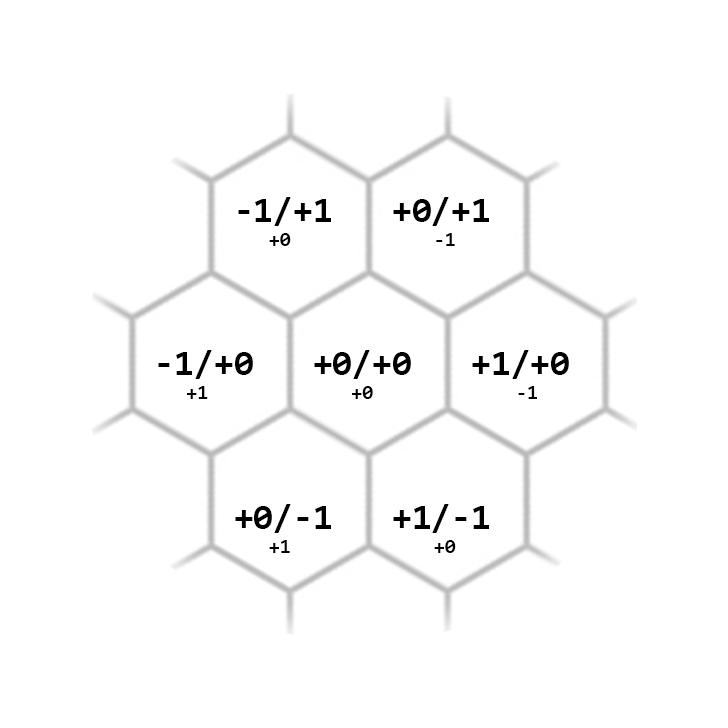
<style>
.page{position:relative;width:728px;height:728px;background:#ffffff}
.page>*{position:absolute;margin:0}
.t1{font:20px "Consolas-Bold";color:#000000}
.t2{font:36px "Consolas-Bold";color:#000000}
</style>
<div class="page">
<p class="t1" style="left:158px;top:197px;width:411px;height:356px;text-align:center"><span class="t2">-1/+1   +0/+1<br></span>+0             -1<br><span class="t2"><br><br>-1/+0   +0/+0   +1/+0<br></span>+1             +0             -1<br><span class="t2"><br><br>+0/-1   +1/-1<br></span>+1             +0</p>
</div>
